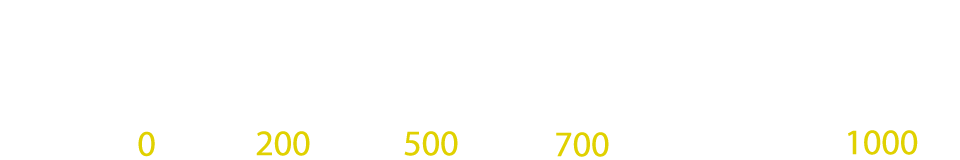
<style>
.page{position:relative;width:960px;height:160px;background:#ffffff}
.page>*{position:absolute;margin:0}
.t1{font:36px "MyriadPro-Regular";color:#e0d100}
</style>
<div class="page">
<p class="t1" style="left:138px;top:131px;width:17px;height:26px">0</p>
<p class="t1" style="left:256px;top:131px;width:54px;height:25px">200</p>
<p class="t1" style="left:404px;top:131px;width:54px;height:25px">500</p>
<p class="t1" style="left:556px;top:132px;width:53px;height:25px">700</p>
<p class="t1" style="left:848px;top:130px;width:70px;height:25px">1000</p>
</div>
